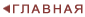
<style>
.page{position:relative;width:85px;height:17px;background:#ffffff}
.page>*{position:absolute;margin:0}
.t1{font:11.9px "ArialUnicodeMS";letter-spacing:0.14em;color:#883a37;font-weight:bold;scale:1.03 1}
</style>
<div class="page">
<p class="t1" style="left:13px;top:4px;width:70px;height:10px">ГЛАВНАЯ</p>
</div>
